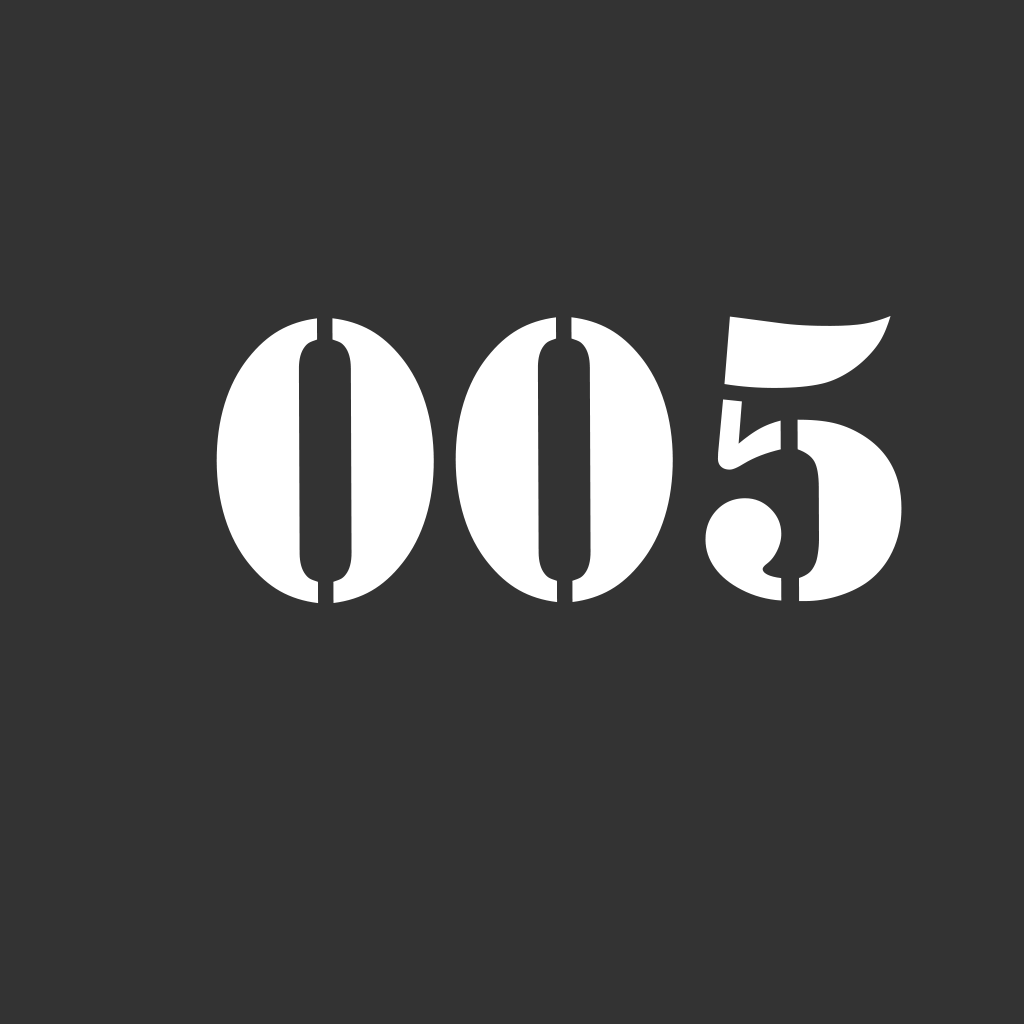
<style>
.page{position:relative;width:1024px;height:1024px;background:#333333}
.page>*{position:absolute;margin:0}
.t1{font:416.7px "Stencil";color:#ffffff}
</style>
<div class="page">
<p class="t1" style="left:216px;top:316px;width:686px;height:288px">005</p>
</div>
